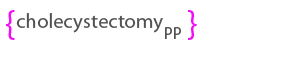
<style>
.page{position:relative;width:300px;height:60px;background:#ffffff}
.page>*{position:absolute;margin:0}
.t1{font:37.5px "MyriadPro-Regular";color:#f30df6}
.t2{font:20.8px "MyriadPro-Regular";color:#525252}
.t3{font:16.7px "MyriadPro-Regular";color:#525252}
</style>
<div class="page">
<p class="t1" style="left:6px;top:10px;width:9px;height:30px">{</p>
<p class="t2" style="left:16px;top:13px;width:147px;height:20px">cholecystectomy</p>
<p class="t1" style="left:188px;top:10px;width:9px;height:30px">}</p>
<p class="t3" style="left:165px;top:27px;width:16px;height:12px">PP</p>
</div>
